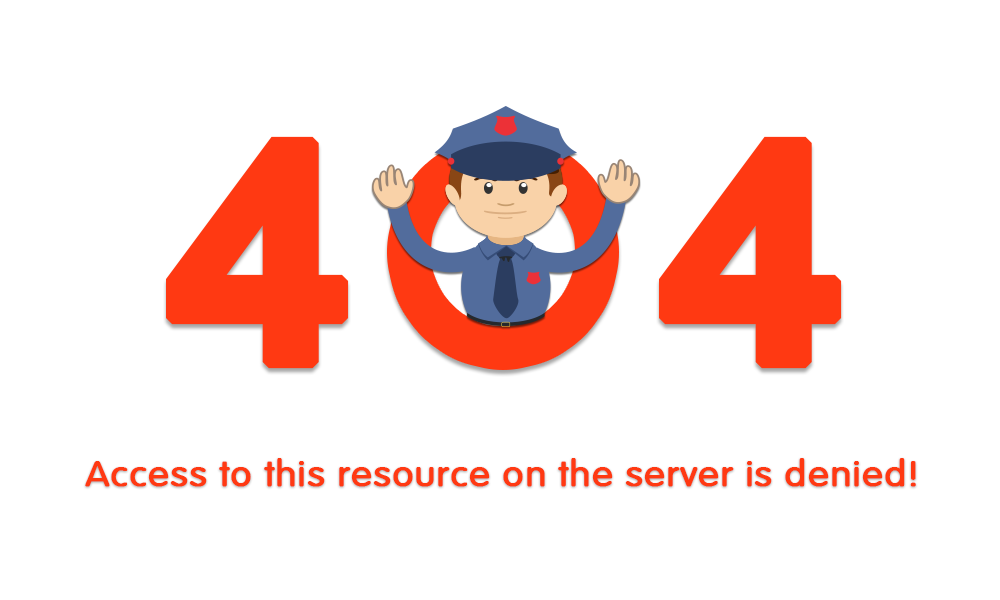
<style>
.page{position:relative;width:1000px;height:600px;background:#ffffff}
.page>*{position:absolute;margin:0}
.t1{font:304.6px "Arial-BoldMT";letter-spacing:0.02em;color:#ff3912;font-weight:bold;scale:1.08 1}
.t2{font:35.6px "Arial-Rounded";letter-spacing:0.02em;color:#ff3912;font-weight:bold;scale:1.08 1}
</style>
<div class="page">
<p class="t1" style="left:166px;top:136px;width:183px;height:233px">4</p>
<p class="t1" style="left:659px;top:136px;width:183px;height:233px">4</p>
<p class="t2" style="left:85px;top:458px;width:831px;height:29px">Access to this resource on the server is denied!</p>
</div>
